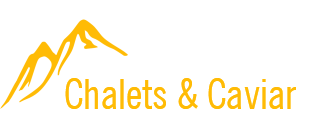
<style>
.page{position:relative;width:328px;height:128px;background:#ffffff}
.page>*{position:absolute;margin:0}
.t1{font:42px "NewsGothicBT-RomanCondensed";color:#ffbb05}
</style>
<div class="page">
<p class="t1" style="left:65px;top:78px;width:231px;height:31px">Chalets &amp; Caviar</p>
</div>
